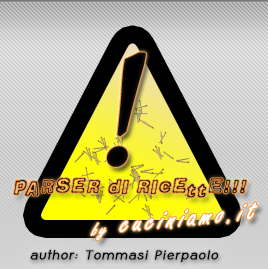
<style>
.page{position:relative;width:268px;height:269px}
.page>*{position:absolute;margin:0}
.t1{font:160.1px "BookAntiqua";letter-spacing:0.1em;color:#000000;font-weight:bold;font-style:italic}
.t2{font:19.9px "Comicate";letter-spacing:0.1em;color:#191912;font-style:italic}
.t3{font:32.3px "FreestyleScript-Regular";letter-spacing:0.1em;color:#ffffff;font-weight:bold;font-style:italic}
.t4{font:19.4px "FreestyleScript-Regular";letter-spacing:0.1em;color:#ffffff;font-weight:bold;font-style:italic}
.t5{font:12px "Coamei-Regular";letter-spacing:0.1em;color:#000000;font-weight:bold;font-style:italic}
</style>
<div class="page">
<p class="t1" style="left:107px;top:52px;width:39px;height:115px">!</p>
<p class="t2" style="left:14px;top:178px;width:233px;height:20px">Parser di ricette!!!</p>
<p class="t3" style="left:90px;top:202px;width:168px;height:39px;rotate:-6deg"><span class="t4">by </span>cuciniamo.it</p>
<p class="t5" style="left:30px;top:250px;width:188px;height:12px">author: Tommasi Pierpaolo</p>
</div>
